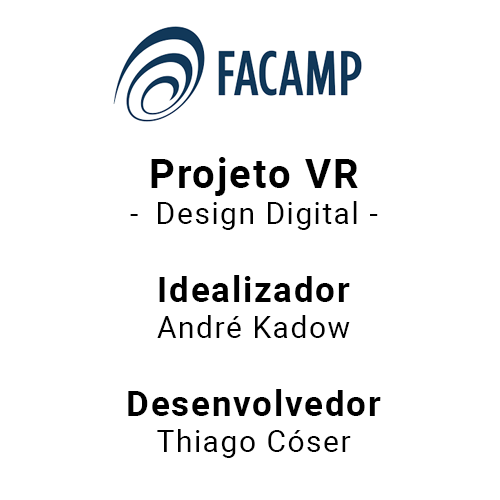
<style>
.page{position:relative;width:500px;height:500px;background:#ffffff}
.page>*{position:absolute;margin:0}
.t1{font:30px "Roboto-Regular";letter-spacing:0.05em;color:#000000}
.t2{font:40px "Roboto-Bold";letter-spacing:0.05em;color:#000000}
.t3{font:35px "Roboto-Bold";letter-spacing:0.05em;color:#000000}
</style>
<div class="page">
<p class="t1" style="left:128px;top:157px;width:253px;height:301px;text-align:center"><span class="t2">Projeto VR <br></span>Design Digital - <br><br><span class="t3">Idealizador<br></span>André Kadow<br><br><span class="t3">Desenvolvedor<br></span>Thiago Cóser</p>
</div>
